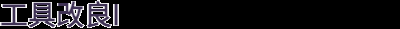
<style>
.page{position:relative;width:400px;height:29px;background:#000000}
.page>*{position:absolute;margin:0}
.t1{font:28px "WebPSD-18463539-0-Regular";color:#3f3254;font-weight:bold}
</style>
<div class="page">
<p class="t1" style="left:0px;top:0px;width:400px;height:29px">工具改良I</p>
</div>
